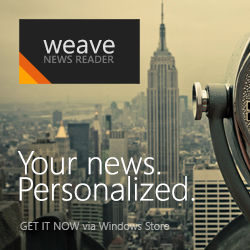
<style>
.page{position:relative;width:250px;height:250px}
.page>*{position:absolute;margin:0}
.t1{font:32.8px/26.3px "SegoeUI-Light";color:#ffffff}
.t2{font:11px "SegoeUI-Semilight";color:#acaeac}
</style>
<div class="page">
<p class="t1" style="left:17px;top:151px;width:178px;height:50px">Your news. <br>Personalized.</p>
<p class="t2" style="left:20px;top:222px;width:150px;height:8px">GET IT NOW via Windows Store</p>
</div>
